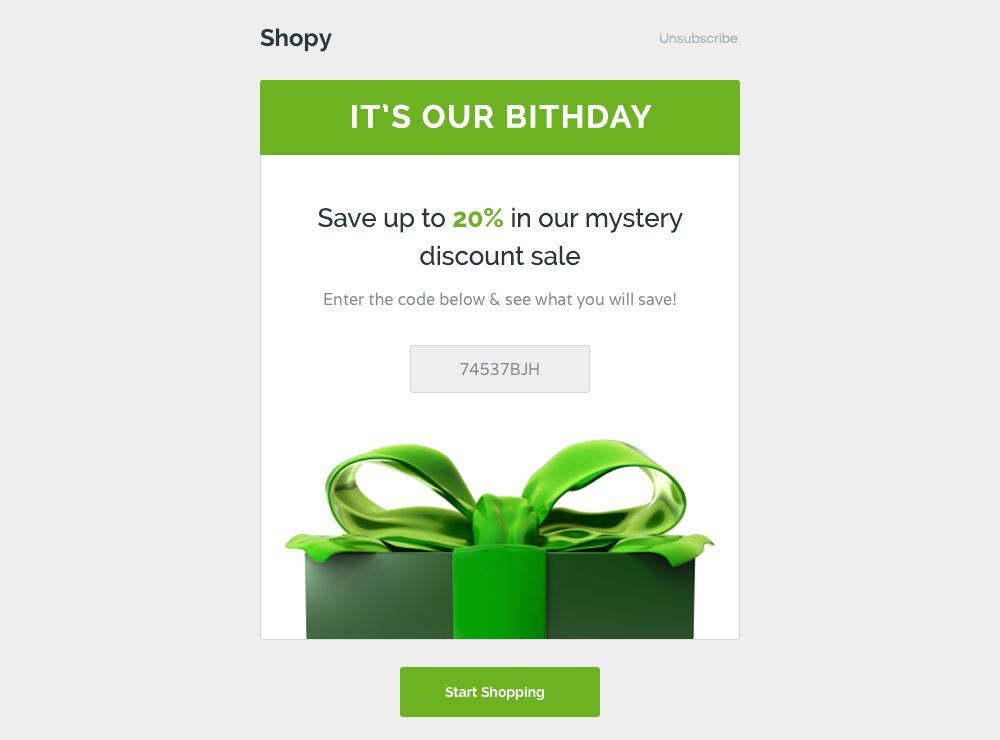
<style>
.page{position:relative;width:1000px;height:740px;background:#eeeeee}
.page>*{position:absolute;margin:0}
.t1{font:24px "Raleway-Bold";color:#2b373d}
.t2{font:14px "Questrial-Regular";color:#a9b4bf}
.t3{font:32px "Raleway-Bold";letter-spacing:0.05em;color:#ffffff;text-transform:uppercase}
.t4{font:26px/38px "Raleway-Medium";color:#2b373d}
.t5{font:26px/38px "Raleway-Bold";color:#6db220}
.t6{font:16px "Varela";color:#818c92}
.t7{font:14px "Raleway-Bold";color:#ffffff}
</style>
<div class="page">
<p class="t1" style="left:260px;top:28px;width:72px;height:24px">Shopy</p>
<p class="t2" style="left:660px;top:32px;width:78px;height:11px">Unsubscribe</p>
<p class="t3" style="left:352px;top:104px;width:300px;height:24px">It’s our bithday</p>
<p class="t4" style="left:318px;top:207px;width:365px;height:59px;text-align:center">Save up to <span class="t5">20% </span>in our mystery discount sale</p>
<p class="t6" style="left:324px;top:292px;width:352px;height:17px">Enter the code below &amp; see what you will save!</p>
<p class="t6" style="left:460px;top:362px;width:79px;height:14px">74537BJH</p>
<p class="t7" style="left:445px;top:686px;width:99px;height:15px">Start Shopping</p>
</div>
